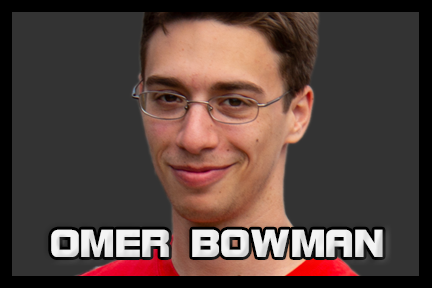
<style>
.page{position:relative;width:432px;height:288px;background:#333333}
.page>*{position:absolute;margin:0}
.t1{font:41.7px "BolsterBold";color:#f3f3f3}
</style>
<div class="page">
<p class="t1" style="left:51px;top:229px;width:332px;height:28px">OMER BOWMAN</p>
</div>
